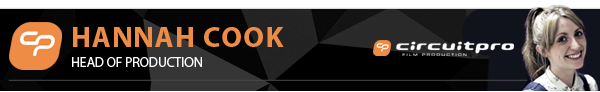
<style>
.page{position:relative;width:600px;height:92px;background:#000000}
.page>*{position:absolute;margin:0}
.t1{font:29px "MyriadPro-Bold";letter-spacing:0.04em;color:#ee8c45;text-transform:uppercase}
.t2{font:14px "MyriadPro-Regular";letter-spacing:-0.02em;color:#ffffff;text-transform:uppercase}
</style>
<div class="page">
<p class="t1" style="left:73px;top:27px;width:211px;height:20px">HANNAH COOK</p>
<p class="t2" style="left:72px;top:57px;width:130px;height:10px">HEAD OF PRODUCTION</p>
</div>
